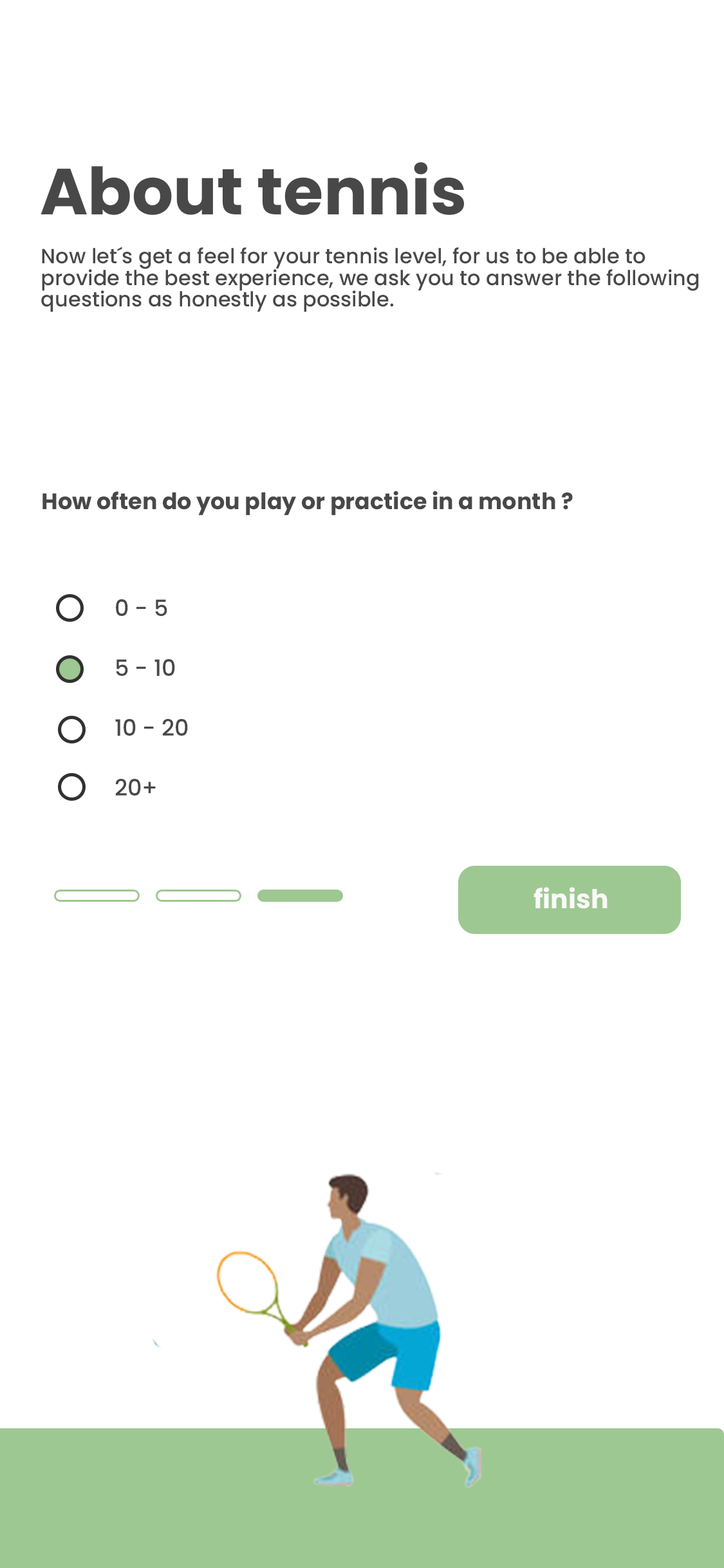
<style>
.page{position:relative;width:724px;height:1568px;background:#ffffff}
.page>*{position:absolute;margin:0}
.t1{font:65px "Poppins-Bold";color:#484848}
.t2{font:20.6px/21.5px "Poppins-Medium";color:#484848}
.t3{font:22.5px "Poppins-Bold";color:#484848}
.t4{font:22.5px "Poppins-Medium";color:#484848}
.t5{font:26.2px "Poppins-Bold";color:#faf9f9}
</style>
<div class="page">
<p class="t1" style="left:41px;top:162px;width:424px;height:53px">About tennis</p>
<p class="t2" style="left:41px;top:247px;width:658px;height:65px">Now let´s get a feel for your tennis level, for us to be able to <br>provide the best experience, we ask you to answer the following<br>questions as honestly as possible.</p>
<p class="t3" style="left:42px;top:491px;width:531px;height:25px">How often do you play or practice in a month ?</p>
<p class="t4" style="left:116px;top:599px;width:51px;height:17px">0 - 5</p>
<p class="t4" style="left:116px;top:659px;width:59px;height:17px">5 - 10</p>
<p class="t4" style="left:115px;top:719px;width:73px;height:17px">10 - 20</p>
<p class="t4" style="left:115px;top:779px;width:41px;height:17px">20+</p>
<p class="t5" style="left:534px;top:887px;width:74px;height:22px">finish</p>
</div>
